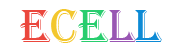
<style>
.page{position:relative;width:178px;height:51px;background:#ffffff}
.page>*{position:absolute;margin:0}
.t1{font:48px "Algerian";color:#eb473d}
.t2{font:48px "Algerian";color:#f3c72d}
.t3{font:48px "Algerian";color:#28cd6e}
.t4{font:48px "Algerian";color:#9956b3}
.t5{font:48px "Algerian";color:#0c8ad5}
</style>
<div class="page">
<p class="t1" style="left:20px;top:9px;width:142px;height:34px">E<span class="t2">C</span><span class="t3">E</span><span class="t4">L</span><span class="t5">L</span></p>
</div>
